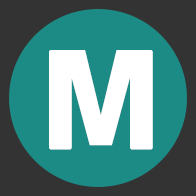
<style>
.page{position:relative;width:196px;height:196px;background:#1c8b86}
.page>*{position:absolute;margin:0}
.t1{font:141.8px "TitilliumWeb-Bold";letter-spacing:-0.01em;color:#ffffff;font-weight:bold}
</style>
<div class="page">
<p class="t1" style="left:49px;top:50px;width:104px;height:100px">M</p>
</div>
